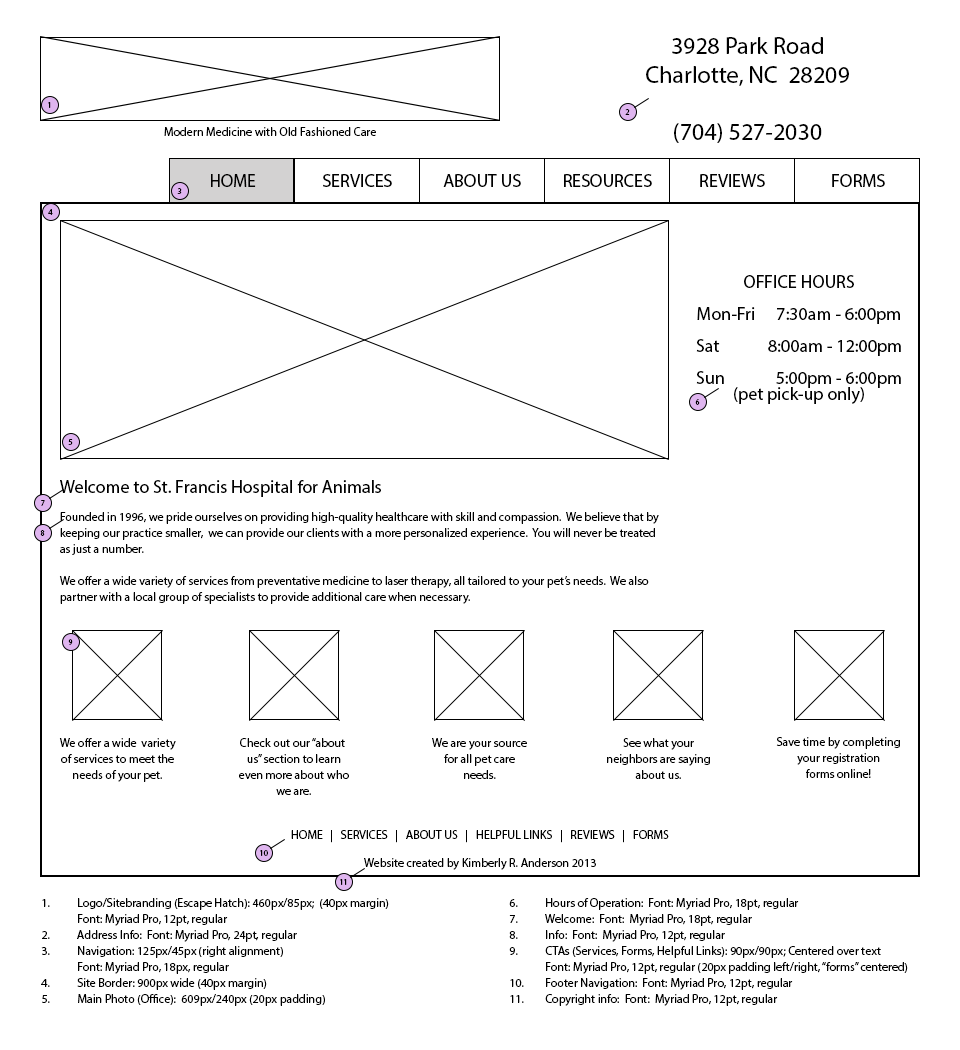
<style>
.page{position:relative;width:960px;height:1050px;background:#ffffff}
.page>*{position:absolute;margin:0}
.t1{font:24px "MyriadPro-Regular";color:#000000}
.t2{font:8px "MyriadPro-Regular";color:#000000}
.t3{font:12px "MyriadPro-Regular";color:#000000}
.t4{font:18px "MyriadPro-Regular";color:#000000}
.t5{font:18px/16px "MyriadPro-Regular";color:#000000}
.t6{font:12px/16px "MyriadPro-Regular";color:#000000}
</style>
<div class="page">
<p class="t1" style="left:646px;top:37px;width:203px;height:106px;text-align:center">3928 Park Road<br>Charlotte, NC  28209<br><br>(704) 527-2030</p>
<p class="t2" style="left:48px;top:102px;width:3px;height:6px">1</p>
<p class="t2" style="left:625px;top:109px;width:5px;height:6px">2</p>
<p class="t3" style="left:164px;top:127px;width:212px;height:9px">Modern Medicine with Old Fashioned Care</p>
<p class="t4" style="left:211px;top:174px;width:45px;height:13px">HOME</p>
<p class="t4" style="left:323px;top:174px;width:69px;height:13px">SERVICES</p>
<p class="t4" style="left:443px;top:174px;width:78px;height:13px">ABOUT US</p>
<p class="t4" style="left:564px;top:174px;width:88px;height:13px">RESOURCES</p>
<p class="t4" style="left:700px;top:174px;width:65px;height:13px">REVIEWS</p>
<p class="t4" style="left:832px;top:174px;width:53px;height:13px">FORMS</p>
<p class="t2" style="left:177px;top:188px;width:5px;height:6px">3</p>
<p class="t2" style="left:48px;top:209px;width:5px;height:6px">4</p>
<p class="t5" style="left:696px;top:275px;width:205px;height:129px;text-align:center">OFFICE HOURS<br><br>Mon-Fri   7:30am - 6:00pm<br><br>Sat  8:00am - 12:00pm<br><br>Sun    5:00pm - 6:00pm<br>(pet pick-up only)</p>
<p class="t2" style="left:695px;top:399px;width:5px;height:6px">6</p>
<p class="t2" style="left:68px;top:439px;width:5px;height:6px">5</p>
<p class="t4" style="left:60px;top:480px;width:321px;height:17px">Welcome to St. Francis Hospital for Animals</p>
<p class="t2" style="left:41px;top:500px;width:4px;height:6px">7</p>
<p class="t6" style="left:59px;top:512px;width:600px;height:92px">Founded in 1996, we pride ourselves on providing high-quality healthcare with skill and compassion.  We believe that by<br>keeping our practice smaller,  we can provide our clients with a more personalized experience.  You will never be treated<br>as just a number.<br><br>We offer a wide variety of services from preventative medicine to laser therapy, all tailored to your pet’s needs.  We also <br>partner with a local group of specialists to provide additional care when necessary.</p>
<p class="t2" style="left:40px;top:530px;width:5px;height:6px">8</p>
<p class="t2" style="left:68px;top:639px;width:5px;height:6px">9</p>
<p class="t6" style="left:776px;top:737px;width:124px;height:41px;text-align:center">Save time by completing<br>your registration<br>forms online!</p>
<p class="t6" style="left:59px;top:738px;width:117px;height:44px;text-align:center">We offer a wide  variety<br>of services to meet the<br>needs of your pet.</p>
<p class="t6" style="left:239px;top:738px;width:110px;height:57px;text-align:center">Check out our “about <br>us” section to learn<br>even more about who<br>we are.</p>
<p class="t6" style="left:432px;top:738px;width:95px;height:41px;text-align:center">We are your source<br>for all pet care<br>needs.</p>
<p class="t6" style="left:607px;top:738px;width:103px;height:41px;text-align:center">See what your<br>neighbors are saying<br>about us.</p>
<p class="t3" style="left:291px;top:830px;width:378px;height:13px">HOME   |   SERVICES   |   ABOUT US   |   HELPFUL LINKS   |   REVIEWS   |   FORMS</p>
<p class="t2" style="left:260px;top:850px;width:8px;height:6px">10</p>
<p class="t3" style="left:364px;top:858px;width:232px;height:12px">Website created by Kimberly R. Anderson 2013</p>
<p class="t2" style="left:340px;top:879px;width:7px;height:6px">11</p>
<p class="t6" style="left:41px;top:898px;width:867px;height:108px">1. Logo/Sitebranding (Escape Hatch): 460px/85px;  (40px margin)    6. Hours of Operation:  Font: Myriad Pro, 18pt, regular<br> Font: Myriad Pro, 12pt, regular        7. Welcome:  Font:  Myriad Pro, 18pt, regular<br>2. Address Info:  Font: Myriad Pro, 24pt, regular      8. Info:  Font:  Myriad Pro, 12pt, regular<br>3. Navigation: 125px/45px (right alignment)       9. CTAs (Services, Forms, Helpful Links): 90px/90px; Centered over text <br> Font: Myriad Pro, 18px, regular         Font: Myriad Pro, 12pt, regular (20px padding left/right, “forms” centered)<br>4. Site Border: 900px wide (40px margin)       10. Footer Navigation:  Font: Myriad Pro, 12pt, regular<br>5. Main Photo (Office):  609px/240px (20px padding)       11. Copyright info:  Font:  Myriad Pro, 12pt, regular</p>
</div>
